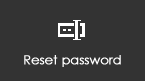
<style>
.page{position:relative;width:145px;height:81px;background:#333333}
.page>*{position:absolute;margin:0}
.t1{font:12.5px "CenturyGothic";color:#ffffff;font-weight:bold}
</style>
<div class="page">
<p class="t1" style="left:24px;top:55px;width:97px;height:12px">Reset password</p>
</div>
